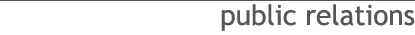
<style>
.page{position:relative;width:415px;height:35px;background:#ffffff}
.page>*{position:absolute;margin:0}
.t1{font:28px "TrebuchetMS";color:#575758}
</style>
<div class="page">
<p class="t1" style="left:221px;top:4px;width:194px;height:27px">public relations</p>
</div>
